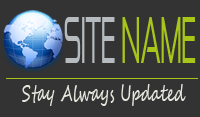
<style>
.page{position:relative;width:200px;height:117px;background:#333333}
.page>*{position:absolute;margin:0}
.t1{font:57.6px "ZektonFree";color:#b5bbbe;scale:0.47 1}
.t2{font:57.6px "ZektonFree";color:#a8c61a;scale:0.47 1}
.t3{font:21.6px "SegoeScript";color:#e5e7dd;scale:0.67 1}
</style>
<div class="page">
<p class="t1" style="left:64px;top:17px;width:132px;height:46px">SITE <span class="t2">NAME</span></p>
<p class="t3" style="left:22px;top:84px;width:164px;height:22px">Stay Always Updated</p>
</div>
